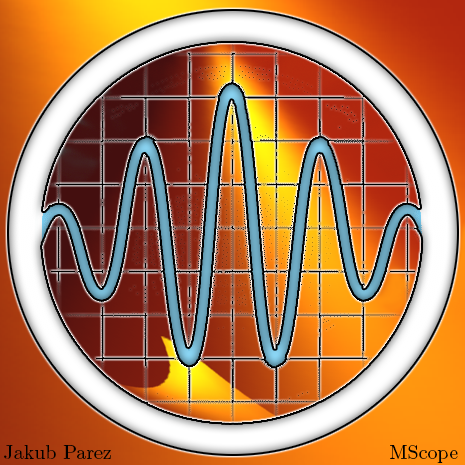
<style>
.page{position:relative;width:465px;height:465px}
.page>*{position:absolute;margin:0}
.t1{font:20px "LMRoman10-Regular";color:#000000}
</style>
<div class="page">
<p class="t1" style="left:4px;top:445px;width:107px;height:14px">Jakub Parez</p>
<p class="t1" style="left:390px;top:445px;width:68px;height:18px">MScope</p>
</div>
